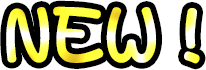
<style>
.page{position:relative;width:206px;height:70px;background:#000000}
.page>*{position:absolute;margin:0}
.t1{font:72px "MYoungHKS-Xbold"}
</style>
<div class="page">
<p class="t1" style="left:6px;top:6px;width:194px;height:58px">NEW !</p>
</div>
